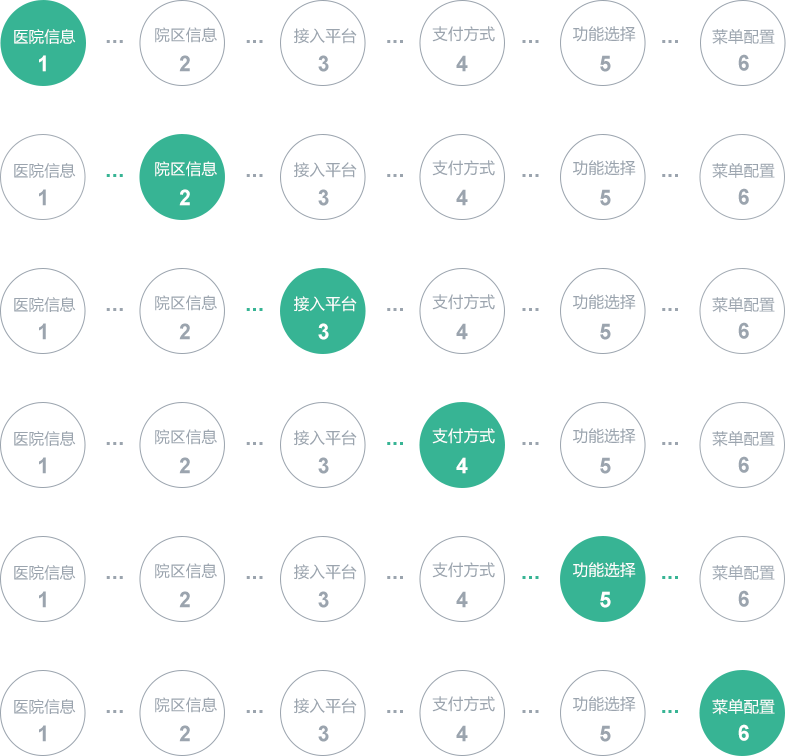
<style>
.page{position:relative;width:786px;height:756px;background:#ffffff}
.page>*{position:absolute;margin:0}
.t1{font:15.6px "MicrosoftYaHei";letter-spacing:0.015em;color:#ffffff}
.t2{font:15.6px "MicrosoftYaHei";letter-spacing:0.015em;color:#9ba4ae}
.t3{font:22px "Arial-BoldMT";letter-spacing:0.015em;color:#9ba4ae}
.t4{font:22px "Arial-BoldMT";letter-spacing:0.015em;color:#ffffff}
.t5{font:22px "Arial-BoldMT";letter-spacing:0.015em;color:#37b494}
.t6{font:15.6px "MicrosoftYaHei";letter-spacing:0.015em;color:#9ea7b1}
</style>
<div class="page">
<p class="t1" style="left:14px;top:29px;width:62px;height:15px">医院信息</p>
<p class="t2" style="left:155px;top:27px;width:62px;height:16px">院区信息</p>
<p class="t2" style="left:294px;top:28px;width:63px;height:16px">接入平台</p>
<p class="t2" style="left:432px;top:26px;width:63px;height:16px">支付方式</p>
<p class="t2" style="left:573px;top:26px;width:63px;height:16px">功能选择</p>
<p class="t2" style="left:712px;top:29px;width:63px;height:16px">菜单配置</p>
<p class="t3" style="left:106px;top:40px;width:17px;height:3px">...</p>
<p class="t3" style="left:246px;top:40px;width:17px;height:3px">...</p>
<p class="t3" style="left:387px;top:40px;width:16px;height:3px">...</p>
<p class="t3" style="left:522px;top:40px;width:17px;height:3px">...</p>
<p class="t3" style="left:662px;top:40px;width:16px;height:3px">...</p>
<p class="t3" style="left:738px;top:54px;width:11px;height:17px">6</p>
<p class="t4" style="left:39px;top:55px;width:7px;height:17px">1</p>
<p class="t3" style="left:179px;top:55px;width:11px;height:17px">2</p>
<p class="t3" style="left:318px;top:55px;width:11px;height:17px">3</p>
<p class="t3" style="left:456px;top:55px;width:12px;height:17px">4</p>
<p class="t3" style="left:600px;top:55px;width:11px;height:17px">5</p>
<p class="t1" style="left:155px;top:161px;width:62px;height:16px">院区信息</p>
<p class="t2" style="left:432px;top:160px;width:63px;height:16px">支付方式</p>
<p class="t2" style="left:573px;top:160px;width:63px;height:16px">功能选择</p>
<p class="t2" style="left:14px;top:163px;width:62px;height:15px">医院信息</p>
<p class="t5" style="left:106px;top:174px;width:17px;height:3px">...</p>
<p class="t3" style="left:246px;top:174px;width:17px;height:3px">...</p>
<p class="t2" style="left:294px;top:162px;width:63px;height:16px">接入平台</p>
<p class="t3" style="left:387px;top:174px;width:16px;height:3px">...</p>
<p class="t3" style="left:522px;top:174px;width:17px;height:3px">...</p>
<p class="t3" style="left:662px;top:174px;width:16px;height:3px">...</p>
<p class="t2" style="left:712px;top:163px;width:63px;height:16px">菜单配置</p>
<p class="t3" style="left:39px;top:189px;width:7px;height:17px">1</p>
<p class="t4" style="left:179px;top:189px;width:11px;height:17px">2</p>
<p class="t3" style="left:318px;top:189px;width:11px;height:17px">3</p>
<p class="t3" style="left:456px;top:189px;width:12px;height:17px">4</p>
<p class="t3" style="left:600px;top:189px;width:11px;height:17px">5</p>
<p class="t3" style="left:738px;top:188px;width:11px;height:17px">6</p>
<p class="t2" style="left:432px;top:294px;width:63px;height:16px">支付方式</p>
<p class="t2" style="left:573px;top:294px;width:63px;height:16px">功能选择</p>
<p class="t2" style="left:14px;top:297px;width:62px;height:15px">医院信息</p>
<p class="t2" style="left:155px;top:295px;width:62px;height:16px">院区信息</p>
<p class="t1" style="left:294px;top:296px;width:63px;height:16px">接入平台</p>
<p class="t2" style="left:712px;top:297px;width:63px;height:16px">菜单配置</p>
<p class="t3" style="left:106px;top:308px;width:17px;height:3px">...</p>
<p class="t5" style="left:246px;top:308px;width:17px;height:3px">...</p>
<p class="t3" style="left:387px;top:308px;width:16px;height:3px">...</p>
<p class="t3" style="left:522px;top:308px;width:17px;height:3px">...</p>
<p class="t3" style="left:662px;top:308px;width:16px;height:3px">...</p>
<p class="t3" style="left:39px;top:323px;width:7px;height:17px">1</p>
<p class="t3" style="left:179px;top:323px;width:11px;height:17px">2</p>
<p class="t4" style="left:318px;top:323px;width:11px;height:17px">3</p>
<p class="t3" style="left:456px;top:323px;width:12px;height:17px">4</p>
<p class="t3" style="left:600px;top:323px;width:11px;height:17px">5</p>
<p class="t3" style="left:738px;top:322px;width:11px;height:17px">6</p>
<p class="t2" style="left:14px;top:431px;width:62px;height:15px">医院信息</p>
<p class="t2" style="left:155px;top:429px;width:62px;height:16px">院区信息</p>
<p class="t2" style="left:294px;top:430px;width:63px;height:16px">接入平台</p>
<p class="t1" style="left:432px;top:428px;width:63px;height:16px">支付方式</p>
<p class="t2" style="left:573px;top:428px;width:63px;height:16px">功能选择</p>
<p class="t2" style="left:712px;top:431px;width:63px;height:16px">菜单配置</p>
<p class="t3" style="left:106px;top:442px;width:17px;height:3px">...</p>
<p class="t3" style="left:246px;top:442px;width:17px;height:3px">...</p>
<p class="t5" style="left:387px;top:442px;width:16px;height:3px">...</p>
<p class="t3" style="left:522px;top:442px;width:17px;height:3px">...</p>
<p class="t3" style="left:662px;top:442px;width:16px;height:3px">...</p>
<p class="t3" style="left:39px;top:457px;width:7px;height:17px">1</p>
<p class="t3" style="left:179px;top:457px;width:11px;height:17px">2</p>
<p class="t3" style="left:318px;top:457px;width:11px;height:17px">3</p>
<p class="t4" style="left:456px;top:457px;width:12px;height:17px">4</p>
<p class="t3" style="left:600px;top:457px;width:11px;height:17px">5</p>
<p class="t3" style="left:738px;top:456px;width:11px;height:17px">6</p>
<p class="t2" style="left:14px;top:565px;width:62px;height:15px">医院信息</p>
<p class="t2" style="left:155px;top:563px;width:62px;height:16px">院区信息</p>
<p class="t2" style="left:294px;top:564px;width:63px;height:16px">接入平台</p>
<p class="t2" style="left:432px;top:562px;width:63px;height:16px">支付方式</p>
<p class="t1" style="left:573px;top:562px;width:63px;height:16px">功能选择</p>
<p class="t6" style="left:712px;top:565px;width:63px;height:16px">菜单配置</p>
<p class="t3" style="left:106px;top:576px;width:17px;height:3px">...</p>
<p class="t3" style="left:246px;top:576px;width:17px;height:3px">...</p>
<p class="t3" style="left:387px;top:576px;width:16px;height:3px">...</p>
<p class="t5" style="left:522px;top:576px;width:17px;height:3px">...</p>
<p class="t5" style="left:662px;top:576px;width:16px;height:3px">...</p>
<p class="t3" style="left:39px;top:591px;width:7px;height:17px">1</p>
<p class="t3" style="left:179px;top:591px;width:11px;height:17px">2</p>
<p class="t3" style="left:318px;top:591px;width:11px;height:17px">3</p>
<p class="t3" style="left:456px;top:591px;width:12px;height:17px">4</p>
<p class="t4" style="left:600px;top:591px;width:11px;height:17px">5</p>
<p class="t3" style="left:738px;top:590px;width:11px;height:17px">6</p>
<p class="t2" style="left:14px;top:699px;width:62px;height:15px">医院信息</p>
<p class="t2" style="left:155px;top:697px;width:62px;height:16px">院区信息</p>
<p class="t2" style="left:294px;top:698px;width:63px;height:16px">接入平台</p>
<p class="t2" style="left:432px;top:696px;width:63px;height:16px">支付方式</p>
<p class="t2" style="left:573px;top:696px;width:63px;height:16px">功能选择</p>
<p class="t1" style="left:712px;top:699px;width:63px;height:16px">菜单配置</p>
<p class="t3" style="left:106px;top:710px;width:17px;height:3px">...</p>
<p class="t3" style="left:246px;top:710px;width:17px;height:3px">...</p>
<p class="t3" style="left:387px;top:710px;width:16px;height:3px">...</p>
<p class="t3" style="left:522px;top:710px;width:17px;height:3px">...</p>
<p class="t5" style="left:662px;top:710px;width:16px;height:3px">...</p>
<p class="t3" style="left:39px;top:725px;width:7px;height:17px">1</p>
<p class="t3" style="left:179px;top:725px;width:11px;height:17px">2</p>
<p class="t3" style="left:318px;top:725px;width:11px;height:17px">3</p>
<p class="t3" style="left:456px;top:725px;width:12px;height:17px">4</p>
<p class="t3" style="left:600px;top:725px;width:11px;height:17px">5</p>
<p class="t4" style="left:738px;top:724px;width:11px;height:17px">6</p>
</div>
